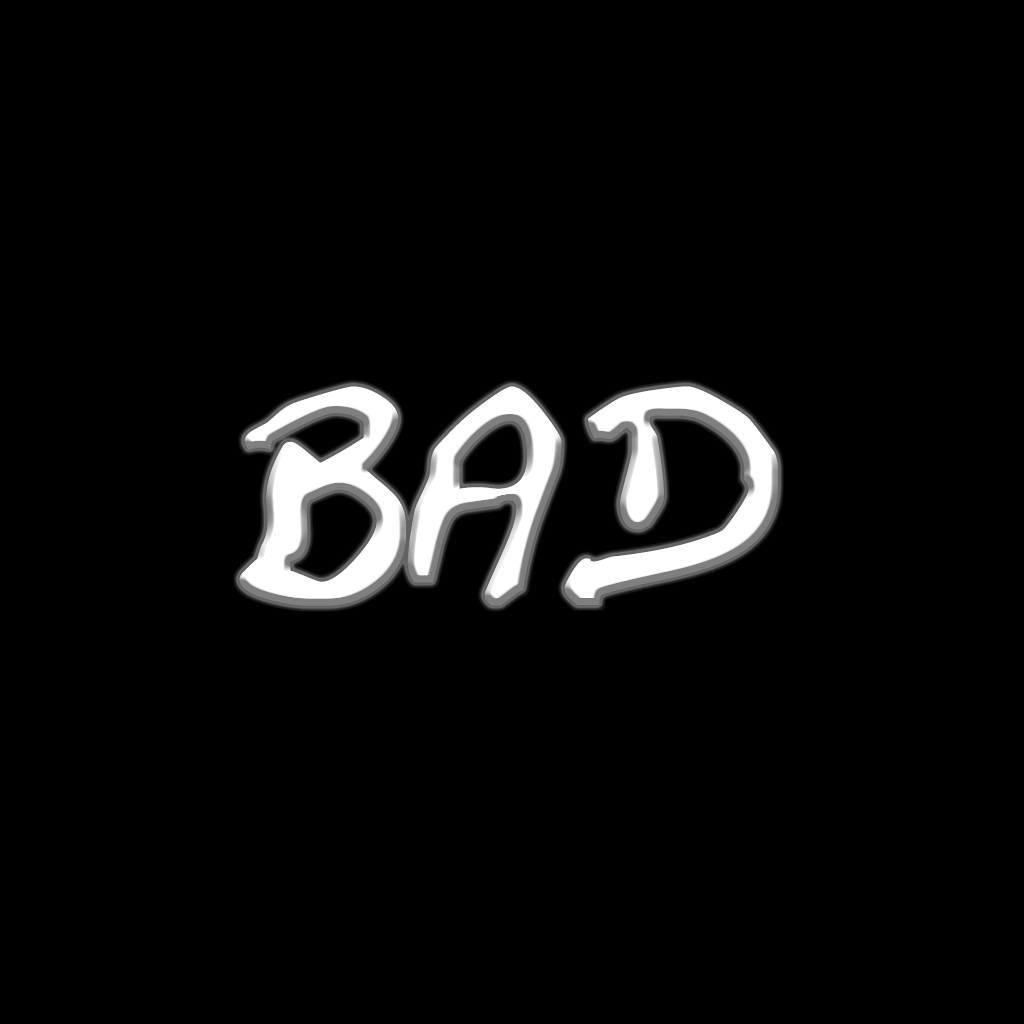
<style>
.page{position:relative;width:1024px;height:1024px;background:#000000}
.page>*{position:absolute;margin:0}
.t1{font:219px "CrackedJohnnie";color:#ffffff}
</style>
<div class="page">
<p class="t1" style="left:239px;top:386px;width:540px;height:220px">BAD</p>
</div>
